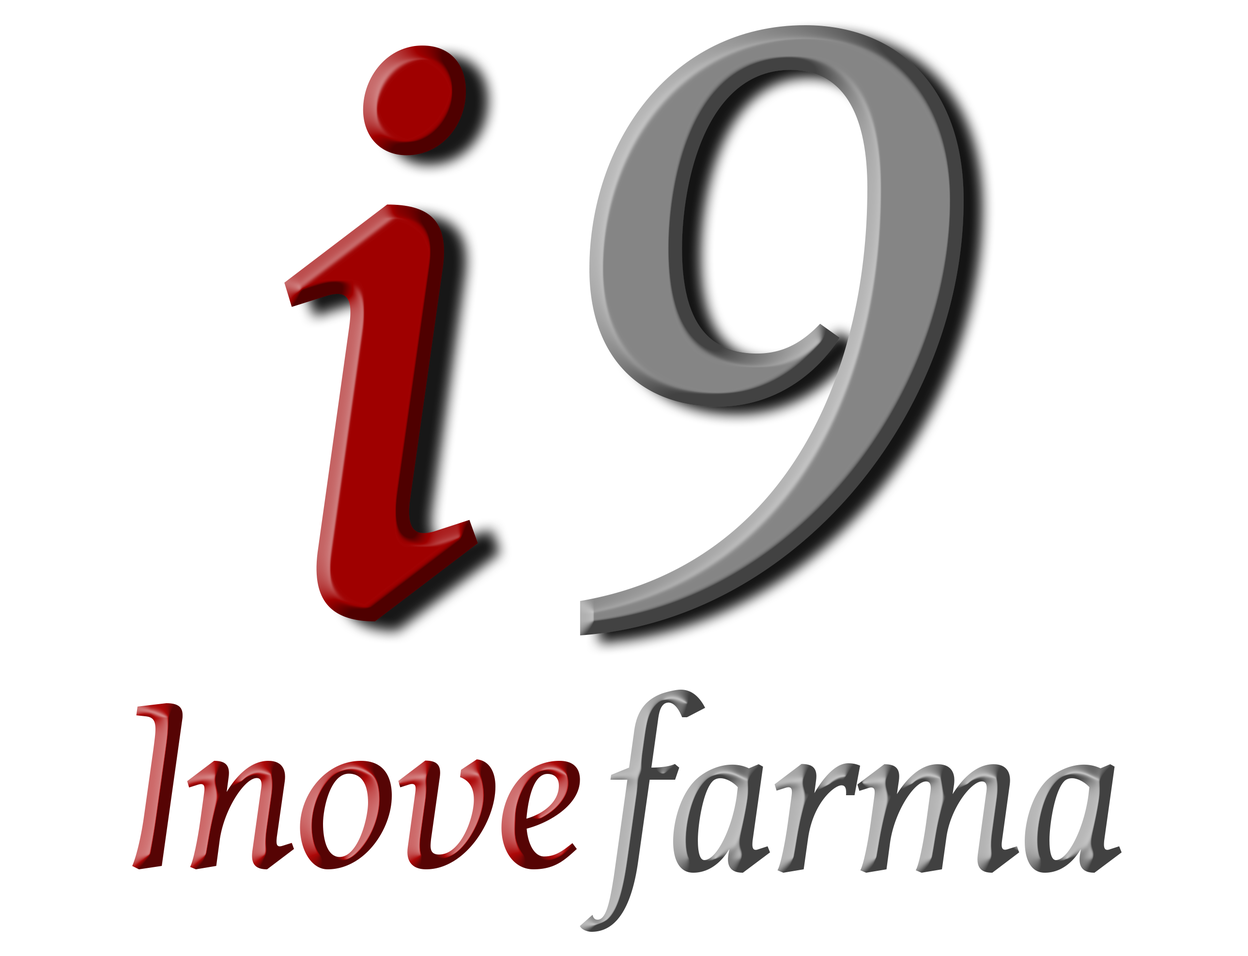
<style>
.page{position:relative;width:1248px;height:956px;background:#ffffff}
.page>*{position:absolute;margin:0}
.t1{font:929.8px "Carbonium-BoldItalic"}
.t2{font:242.1px "Carbonium-BoldItalic"}
</style>
<div class="page">
<p class="t1" style="left:580px;top:25px;width:383px;height:610px">9</p>
<p class="t1" style="left:284px;top:46px;width:194px;height:575px">i</p>
<p class="t2" style="left:580px;top:689px;width:541px;height:243px">farma</p>
<p class="t2" style="left:132px;top:703px;width:448px;height:166px">Inove</p>
</div>
